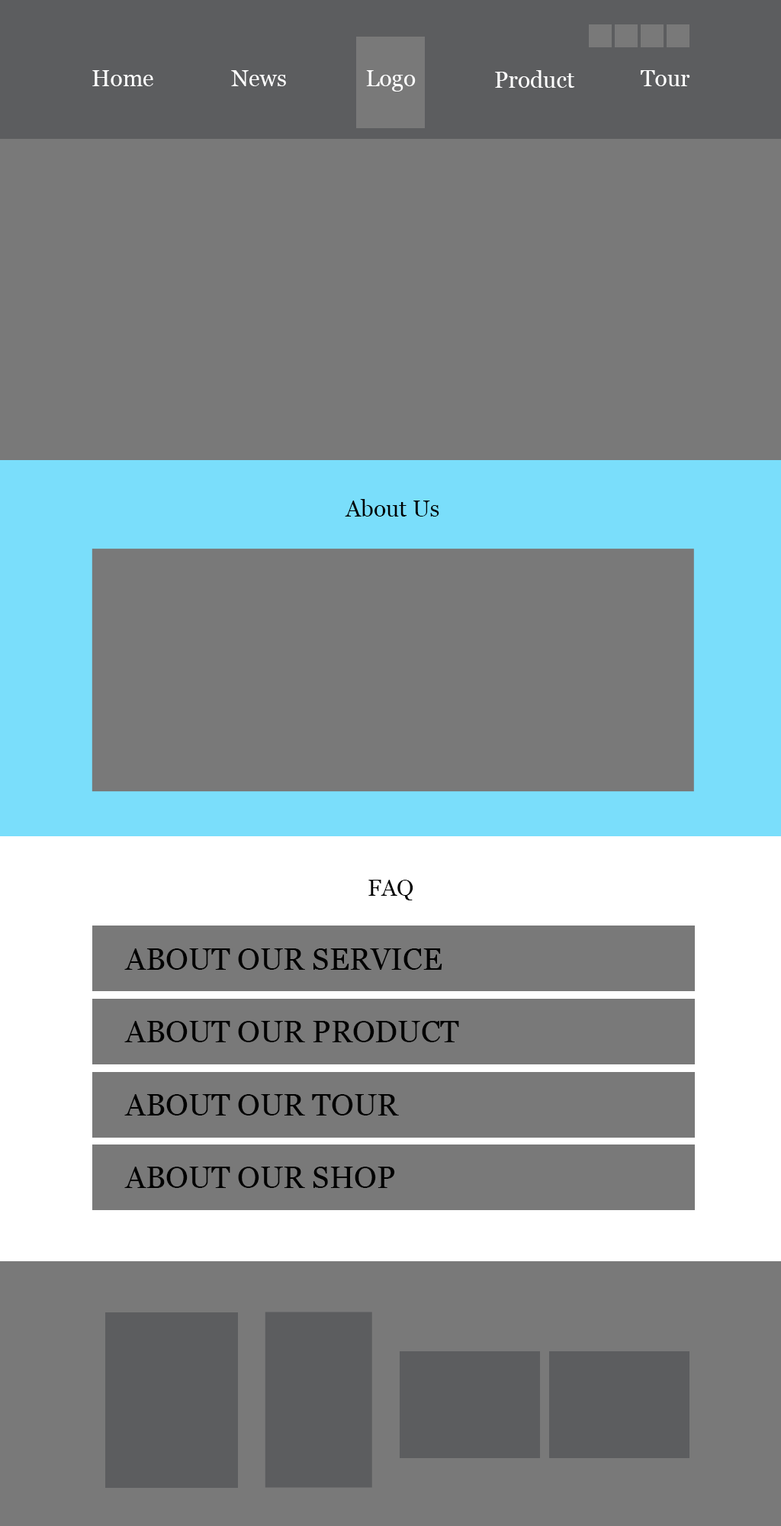
<style>
.page{position:relative;width:781px;height:1526px;background:#797979}
.page>*{position:absolute;margin:0}
.t1{font:22.9px "Georgia";color:#ffffff}
.t2{font:22.9px "Georgia";color:#010101}
.t3{font:30.5px "Georgia";color:#010101}
</style>
<div class="page">
<p class="t1" style="left:92px;top:70px;width:61px;height:16px">Home</p>
<p class="t1" style="left:231px;top:70px;width:55px;height:16px">News</p>
<p class="t1" style="left:366px;top:70px;width:50px;height:22px">Logo</p>
<p class="t1" style="left:495px;top:70px;width:80px;height:18px">Product</p>
<p class="t1" style="left:641px;top:70px;width:50px;height:16px">Tour</p>
<p class="t2" style="left:345px;top:499px;width:95px;height:18px">About Us</p>
<p class="t2" style="left:369px;top:880px;width:45px;height:20px">FAQ</p>
<p class="t3" style="left:124px;top:948px;width:319px;height:22px">ABOUT OUR SERVICE</p>
<p class="t3" style="left:124px;top:1021px;width:335px;height:21px">ABOUT OUR PRODUCT</p>
<p class="t3" style="left:124px;top:1094px;width:275px;height:22px">ABOUT OUR TOUR</p>
<p class="t3" style="left:124px;top:1167px;width:271px;height:21px">ABOUT OUR SHOP</p>
</div>
